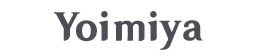
<style>
.page{position:relative;width:256px;height:56px;background:#ffffff}
.page>*{position:absolute;margin:0}
.t1{font:36px "HYWenHei-HEW";color:#4f4e57}
</style>
<div class="page">
<p class="t1" style="left:53px;top:11px;width:150px;height:39px">Yoimiya</p>
</div>
